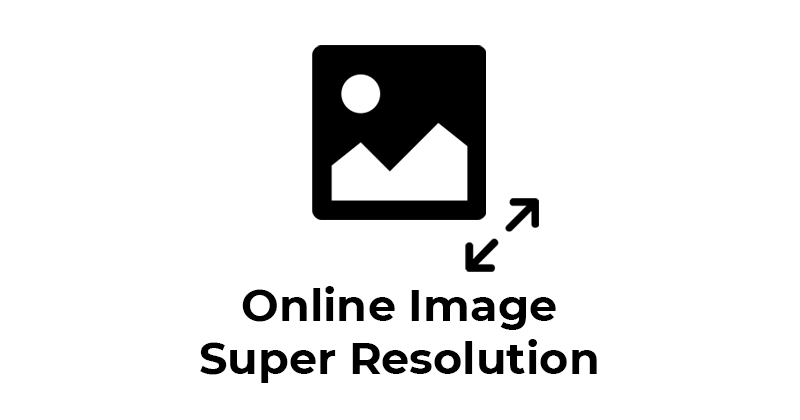
<style>
.page{position:relative;width:800px;height:420px;background:#ffffff}
.page>*{position:absolute;margin:0}
.t1{font:44.6px "Montserrat-Bold";color:#000000}
</style>
<div class="page">
<p class="t1" style="left:200px;top:286px;width:397px;height:97px;text-align:center">Online Image<br>Super Resolution</p>
</div>
